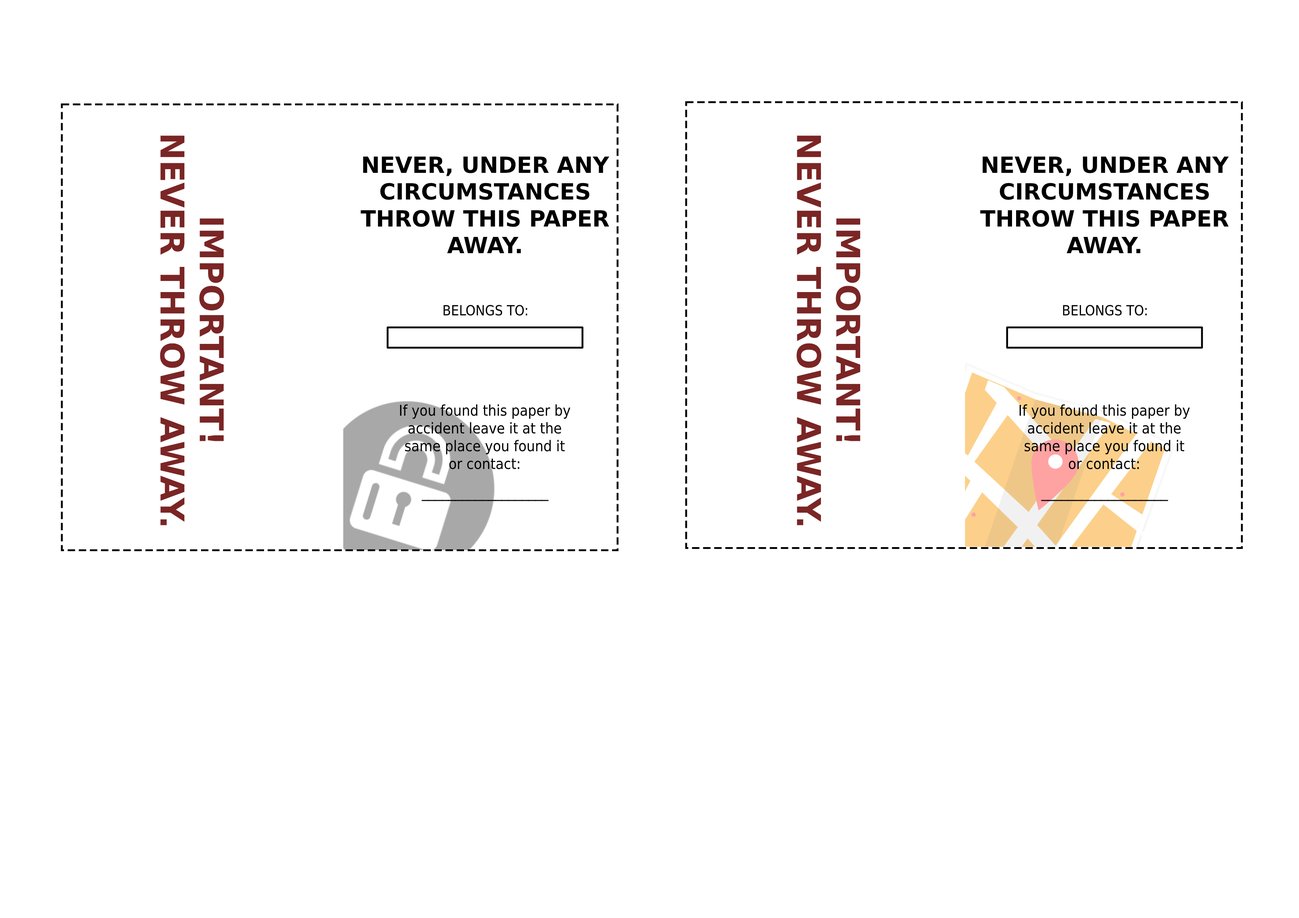
<style>
.page{position:relative;width:1299px;height:918px;background:#ffffff}
.page>*{position:absolute;margin:0}
.t1{font:32.7px "DejaVuSans-Bold";color:#7b2525}
.t2{font:22.3px "DejaVuSans-Bold";color:#000000}
.t3{font:14.1px "DejaVuSansCondensed";color:#000000}
.t4{font:14.8px "DejaVuSansCondensed";color:#000000}
</style>
<div class="page">
<p class="t1" style="left:160px;top:136px;width:64px;height:389px;text-align:center;rotate:90deg">IMPORTANT!<br>NEVER THROW AWAY.</p>
<p class="t1" style="left:796px;top:136px;width:65px;height:389px;text-align:center;rotate:90deg">IMPORTANT!<br>NEVER THROW AWAY.</p>
<p class="t2" style="left:361px;top:157px;width:248px;height:96px;text-align:center">NEVER, UNDER ANY<br>CIRCUMSTANCES<br>THROW THIS PAPER<br>AWAY.</p>
<p class="t2" style="left:980px;top:157px;width:249px;height:96px;text-align:center">NEVER, UNDER ANY<br>CIRCUMSTANCES<br>THROW THIS PAPER<br>AWAY.</p>
<p class="t3" style="left:443px;top:305px;width:84px;height:11px">BELONGS TO:</p>
<p class="t3" style="left:1063px;top:305px;width:84px;height:11px">BELONGS TO:</p>
<p class="t4" style="left:400px;top:404px;width:171px;height:65px;text-align:center">If you found this paper by<br>accident leave it at the<br>same place you found it<br>or contact:</p>
<p class="t4" style="left:1019px;top:404px;width:171px;height:65px;text-align:center">If you found this paper by<br>accident leave it at the<br>same place you found it<br>or contact:</p>
<p class="t4" style="left:421px;top:500px;width:128px;height:1px">___________________</p>
<p class="t4" style="left:1041px;top:500px;width:127px;height:1px">___________________</p>
</div>
